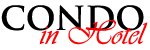
<style>
.page{position:relative;width:150px;height:50px;background:#ffffff}
.page>*{position:absolute;margin:0}
.t1{font:32px "TrajanPro-Bold";color:#000000}
.t2{font:32px "Vivaldii";color:#fe0000}
</style>
<div class="page">
<p class="t1" style="left:1px;top:5px;width:143px;height:26px">CONDO</p>
<p class="t2" style="left:39px;top:20px;width:109px;height:25px">in Hotel</p>
</div>
